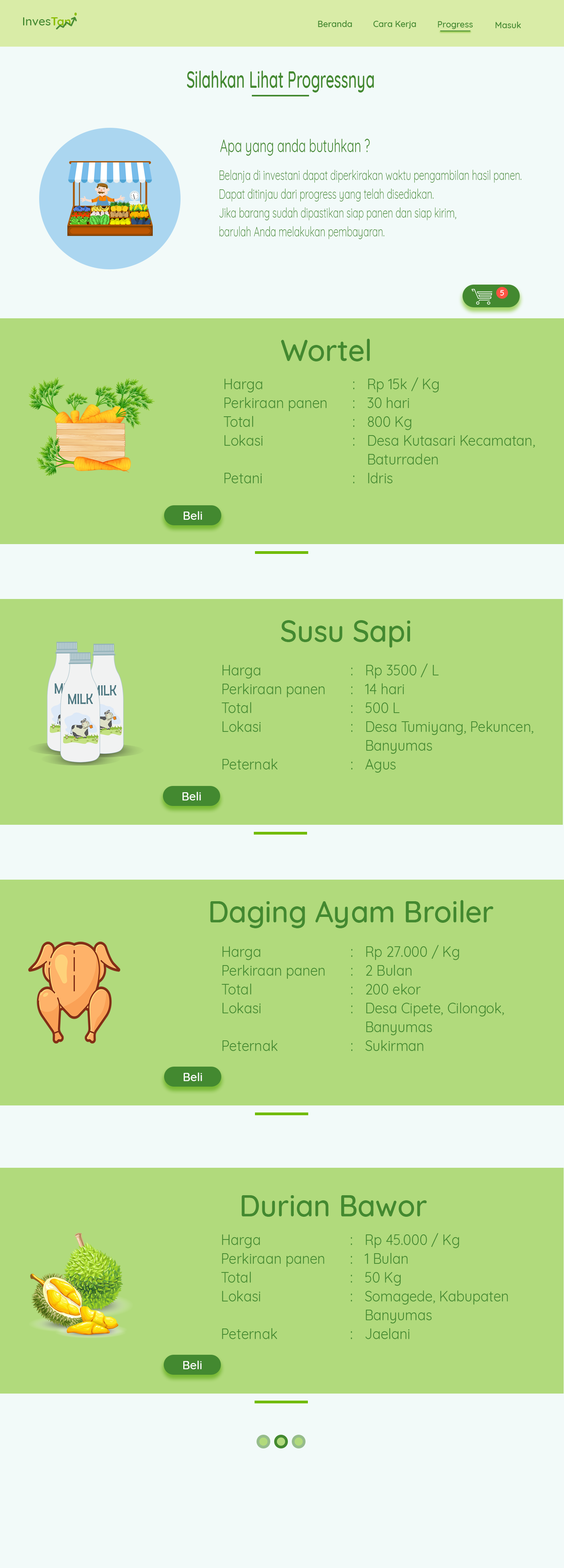
<style>
.page{position:relative;width:564px;height:1568px;background:#b1da7c}
.page>*{position:absolute;margin:0}
.t1{font:11.8px "Quicksand-Medium";color:#438930}
.t2{font:11.8px "Quicksand-Bold";color:#8dbf06}
.t3{font:8.6px "Quicksand-Medium";color:#438930}
.t4{font:23.5px "Quicksand-Medium";color:#438930;scale:0.62 1}
.t5{font:17.6px "Quicksand-Regular";color:#438930;scale:0.68 1}
.t6{font:13.7px/18.8px "Quicksand-Light";color:#438930;scale:0.68 1}
.t7{font:7.8px "Quicksand-Medium";color:#ffffff}
.t8{font:29.8px "Quicksand-Medium";color:#438930}
.t9{font:14.9px/18.8px "Quicksand-Regular";color:#438930;scale:0.92 1}
.t10{font:11.8px "Quicksand-Medium";color:#ffffff}
</style>
<div class="page">
<p class="t1" style="left:23px;top:17px;width:48px;height:8px">Inves<span class="t2">Tan</span></p>
<p class="t3" style="left:318px;top:20px;width:34px;height:7px">Beranda</p>
<p class="t3" style="left:374px;top:21px;width:42px;height:8px">Cara Kerja</p>
<p class="t3" style="left:438px;top:21px;width:35px;height:8px">Progress</p>
<p class="t3" style="left:496px;top:22px;width:25px;height:6px">Masuk</p>
<p class="t4" style="left:187px;top:71px;width:187px;height:22px">Silahkan Lihat Progressnya</p>
<p class="t5" style="left:220px;top:139px;width:150px;height:17px">Apa yang anda butuhkan ?</p>
<p class="t6" style="left:220px;top:170px;width:302px;height:69px">Belanja di investani dapat diperkirakan waktu pengambilan hasil panen.<br>Dapat ditinjau dari progress yang telah disediakan. <br>Jika barang sudah dipastikan siap panen dan siap kirim, <br>barulah Anda melakukan pembayaran.</p>
<p class="t7" style="left:501px;top:290px;width:4px;height:6px">5</p>
<p class="t8" style="left:281px;top:339px;width:89px;height:22px">Wortel</p>
<p class="t9" style="left:224px;top:377px;width:311px;height:106px">Harga       : Rp 15k / Kg<br>Perkiraan panen  : 30 hari<br>Total       : 800 Kg<br>Lokasi       : Desa Kutasari Kecamatan,<br>          Baturraden<br>Petani       : Idris</p>
<p class="t10" style="left:184px;top:511px;width:18px;height:9px">Beli</p>
<p class="t8" style="left:281px;top:620px;width:130px;height:28px">Susu Sapi</p>
<p class="t9" style="left:222px;top:663px;width:312px;height:110px">Harga       : Rp 3500 / L<br>Perkiraan panen  : 14 hari<br>Total       : 500 L<br>Lokasi       : Desa Tumiyang, Pekuncen, <br>          Banyumas<br>Peternak      : Agus</p>
<p class="t10" style="left:183px;top:792px;width:18px;height:8px">Beli</p>
<p class="t8" style="left:211px;top:900px;width:283px;height:28px">Daging Ayam Broiler</p>
<p class="t9" style="left:222px;top:945px;width:283px;height:106px">Harga       : Rp 27.000 / Kg<br>Perkiraan panen  : 2 Bulan<br>Total       : 200 ekor<br>Lokasi       : Desa Cipete, Cilongok, <br>          Banyumas<br>Peternak      : Sukirman</p>
<p class="t10" style="left:184px;top:1073px;width:18px;height:8px">Beli</p>
<p class="t8" style="left:242px;top:1195px;width:185px;height:22px">Durian Bawor</p>
<p class="t9" style="left:221px;top:1233px;width:287px;height:106px">Harga       : Rp 45.000 / Kg<br>Perkiraan panen  : 1 Bulan<br>Total       : 50 Kg<br>Lokasi       : Somagede, Kabupaten <br>          Banyumas<br>Peternak      : Jaelani</p>
<p class="t10" style="left:183px;top:1361px;width:19px;height:8px">Beli</p>
</div>
